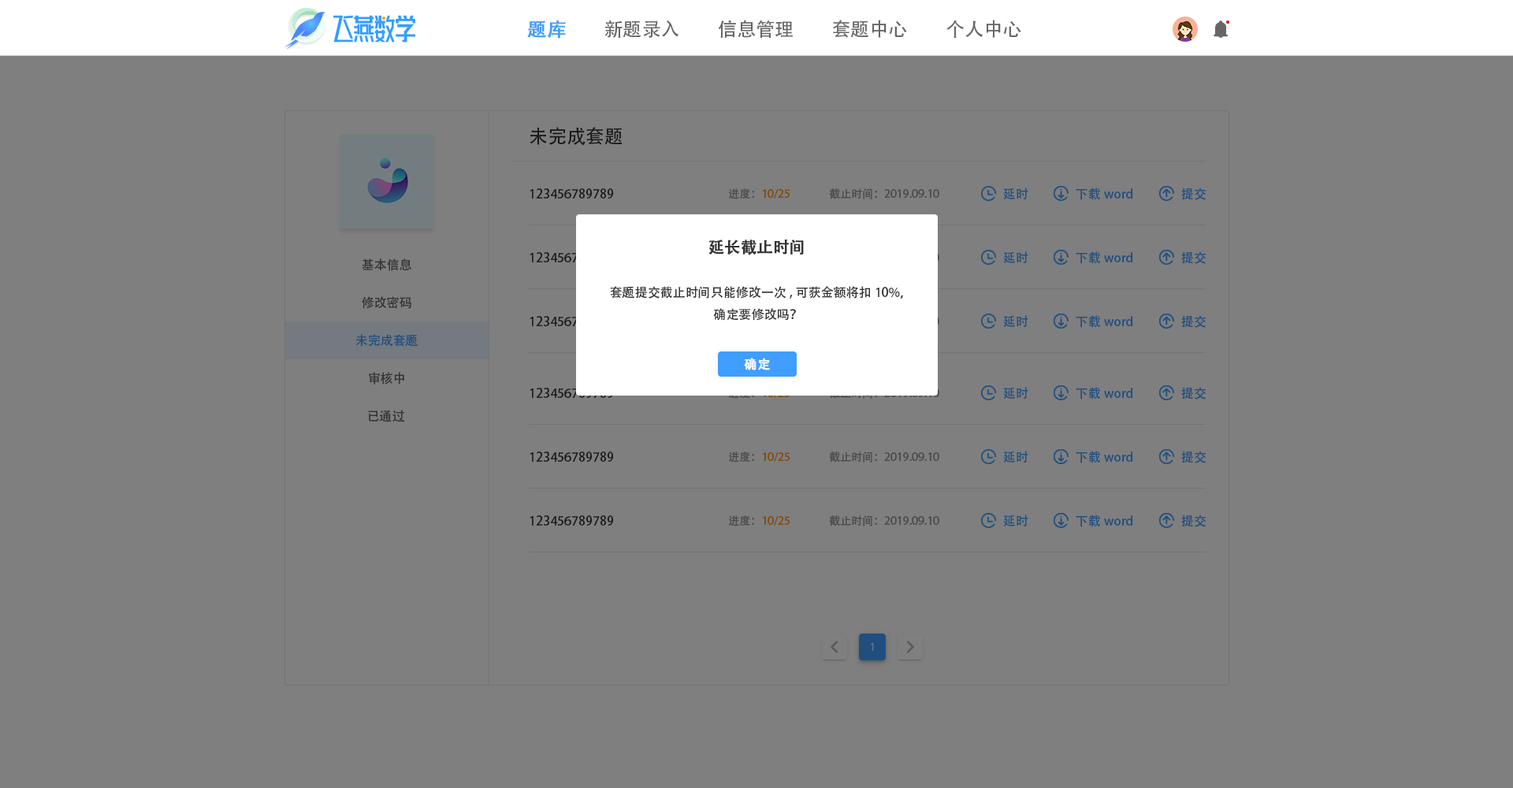
<style>
.page{position:relative;width:1513px;height:788px;background:#7f7f7f}
.page>*{position:absolute;margin:0}
.t1{font:18.9px "AdobeHeitiStd-Regular";color:#409eff;font-weight:bold}
.t2{font:18.9px "AdobeHeitiStd-Regular";color:#666666}
.t3{font:18.9px "AdobeHeitiStd-Regular";color:#191919}
.t4{font:12.6px "AdobeHeitiStd-Regular";color:#191919}
.t5{font:11px "AdobeHeitiStd-Regular"}
.t6{font:11px "AdobeHeitiStd-Regular";color:#4c4c4c}
.t7{font:12.6px "AdobeHeitiStd-Regular";color:#204f7f}
.t8{font:15.8px "AdobeHeitiStd-Regular";color:#333333;font-weight:bold}
.t9{font:12.6px "AdobeHeitiStd-Regular";color:#333333}
.t10{font:12.6px "AdobeHeitiStd-Regular";color:#fefefe;font-weight:bold}
</style>
<div class="page">
<p class="t1" style="left:527px;top:20px;width:39px;height:19px">题库</p>
<p class="t2" style="left:604px;top:20px;width:75px;height:18px">新题录入</p>
<p class="t2" style="left:718px;top:20px;width:75px;height:19px">信息管理</p>
<p class="t2" style="left:833px;top:20px;width:74px;height:18px">套题中心</p>
<p class="t2" style="left:946px;top:20px;width:75px;height:18px">个人中心</p>
<p class="t3" style="left:530px;top:127px;width:93px;height:18px">未完成套题</p>
<p class="t4" style="left:530px;top:188px;width:84px;height:11px">123456789789</p>
<p class="t5" style="left:729px;top:188px;width:61px;height:11px">进度：10/25</p>
<p class="t6" style="left:829px;top:188px;width:110px;height:11px">截止时间：2019.09.10</p>
<p class="t7" style="left:1003px;top:188px;width:25px;height:11px">延时</p>
<p class="t7" style="left:1076px;top:188px;width:57px;height:12px">下载word</p>
<p class="t7" style="left:1181px;top:188px;width:25px;height:12px">提交</p>
<p class="t8" style="left:708px;top:240px;width:96px;height:15px">延长截止时间</p>
<p class="t7" style="left:1003px;top:251px;width:25px;height:12px">延时</p>
<p class="t7" style="left:1076px;top:251px;width:57px;height:13px">下载word</p>
<p class="t7" style="left:1181px;top:251px;width:25px;height:13px">提交</p>
<p class="t9" style="left:362px;top:258px;width:50px;height:13px">基本信息</p>
<p class="t9" style="left:610px;top:286px;width:293px;height:35px;text-align:center">套题提交截止时间只能修改一次,可获金额将扣10%，<br>确定要修改吗？</p>
<p class="t9" style="left:362px;top:296px;width:49px;height:13px">修改密码</p>
<p class="t7" style="left:1003px;top:315px;width:25px;height:12px">延时</p>
<p class="t7" style="left:1076px;top:315px;width:57px;height:13px">下载word</p>
<p class="t7" style="left:1181px;top:315px;width:25px;height:13px">提交</p>
<p class="t7" style="left:355px;top:334px;width:63px;height:13px">未完成套题</p>
<p class="t10" style="left:744px;top:358px;width:26px;height:12px">确定</p>
<p class="t9" style="left:369px;top:372px;width:35px;height:13px">审核中</p>
<p class="t7" style="left:1003px;top:387px;width:25px;height:12px">延时</p>
<p class="t7" style="left:1076px;top:387px;width:57px;height:13px">下载word</p>
<p class="t7" style="left:1181px;top:387px;width:25px;height:13px">提交</p>
<p class="t9" style="left:368px;top:410px;width:37px;height:12px">已通过</p>
<p class="t4" style="left:530px;top:452px;width:84px;height:10px">123456789789</p>
<p class="t5" style="left:729px;top:452px;width:61px;height:11px">进度：10/25</p>
<p class="t6" style="left:829px;top:452px;width:110px;height:11px">截止时间：2019.09.10</p>
<p class="t7" style="left:1003px;top:451px;width:25px;height:12px">延时</p>
<p class="t7" style="left:1076px;top:451px;width:57px;height:12px">下载word</p>
<p class="t7" style="left:1181px;top:451px;width:25px;height:12px">提交</p>
<p class="t4" style="left:530px;top:515px;width:84px;height:11px">123456789789</p>
<p class="t5" style="left:729px;top:515px;width:61px;height:11px">进度：10/25</p>
<p class="t6" style="left:829px;top:515px;width:110px;height:11px">截止时间：2019.09.10</p>
<p class="t7" style="left:1003px;top:515px;width:25px;height:11px">延时</p>
<p class="t7" style="left:1076px;top:515px;width:57px;height:12px">下载word</p>
<p class="t7" style="left:1181px;top:515px;width:25px;height:12px">提交</p>
</div>
